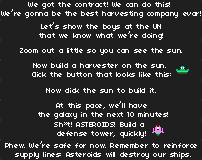
<style>
.page{position:relative;width:202px;height:160px;background:#1f1f1f}
.page>*{position:absolute;margin:0}
.t1{font:8px "04b03";letter-spacing:-0.05em;color:#ffffff}
.t2{font:8px "Minecraftia";letter-spacing:-0.05em;color:#ffffff}
</style>
<div class="page">
<p class="t1" style="left:1px;top:2px;width:200px;height:16px;text-align:center">We got the contract! We can do this! <br>We<span class="t2">’</span>re gonna be the best harvesting company evar!</p>
<p class="t1" style="left:39px;top:22px;width:124px;height:18px;text-align:center">Let<span class="t2">’</span>s show the boys at the UN<br>that we know what we<span class="t2">’</span>re doing!</p>
<p class="t1" style="left:20px;top:48px;width:162px;height:7px">Zoom out a little so you can see the sun.</p>
<p class="t1" style="left:32px;top:63px;width:139px;height:14px;text-align:center">Now build a harvester on the sun. <br>Click the button that looks like this:</p>
<p class="t1" style="left:46px;top:88px;width:110px;height:5px">Now click the sun to build it.</p>
<p class="t1" style="left:38px;top:101px;width:130px;height:18px;text-align:center">At this pace, we<span class="t2">’</span>ll have<br> the galaxy in the next 10 minutes!</p>
<p class="t1" style="left:54px;top:122px;width:92px;height:16px;text-align:center">Sh*t! ASTEROIDS! Build a <br>defense tower, quickly!</p>
<p class="t1" style="left:5px;top:141px;width:192px;height:18px;text-align:center">Phew. We<span class="t2">’</span>re safe for now. Remember to reinforce<br> supply lines: Asteroids will destroy our ships.</p>
</div>
